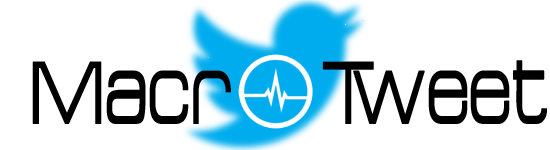
<style>
.page{position:relative;width:550px;height:150px;background:#ffffff}
.page>*{position:absolute;margin:0}
.t1{font:98.8px "Acens";color:#000000;scale:0.77 1}
</style>
<div class="page">
<p class="t1" style="left:32px;top:60px;width:515px;height:64px">Macr     Tweet</p>
</div>
